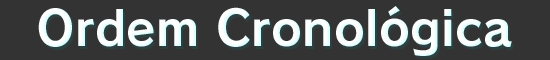
<style>
.page{position:relative;width:550px;height:60px;background:#333333}
.page>*{position:absolute;margin:0}
.t1{font:48px "RodinPro-B";color:#fefefe}
</style>
<div class="page">
<p class="t1" style="left:38px;top:6px;width:474px;height:50px">Ordem Cronológica</p>
</div>
